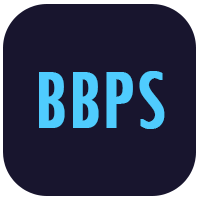
<style>
.page{position:relative;width:200px;height:200px;background:#18152e}
.page>*{position:absolute;margin:0}
.t1{font:87.5px "TwCenMT-Condensed";color:#4fccfe;font-weight:bold}
</style>
<div class="page">
<p class="t1" style="left:39px;top:71px;width:126px;height:58px">BBPS</p>
</div>
